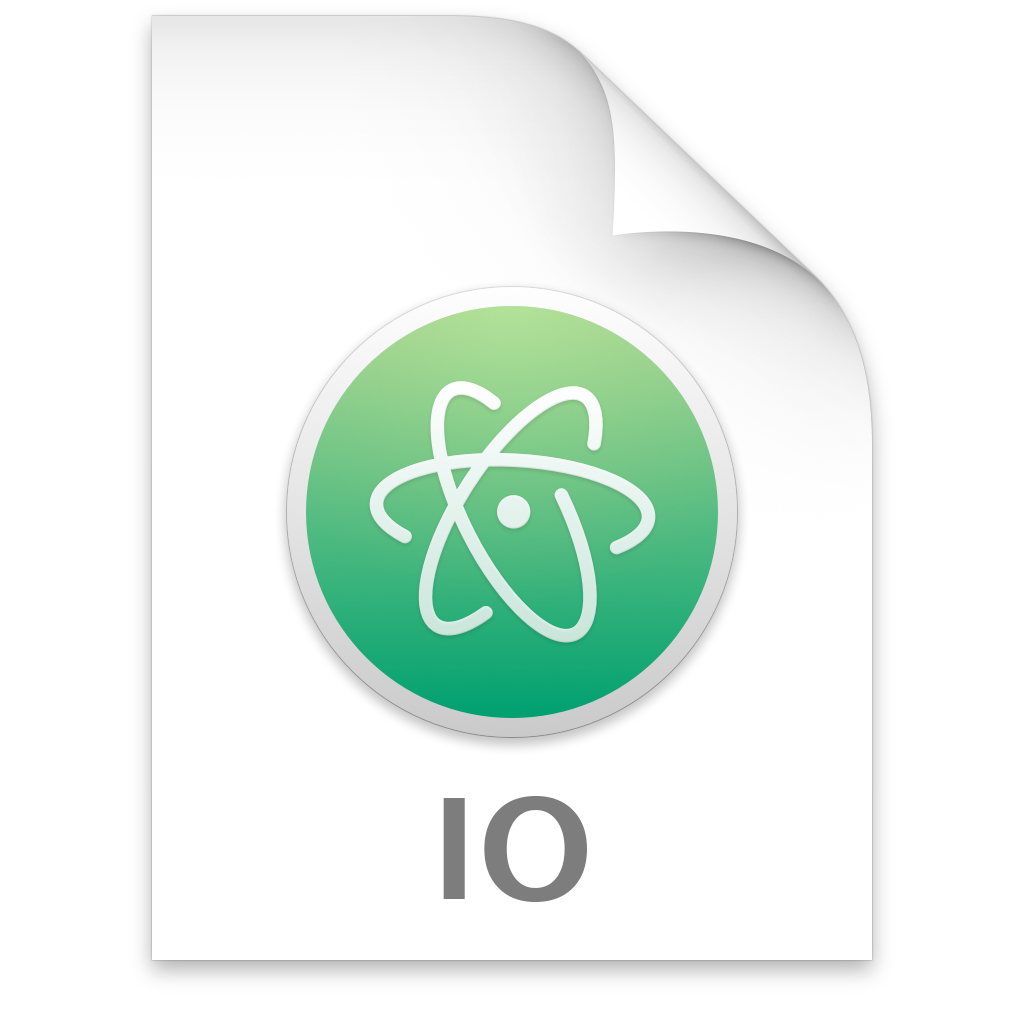
<style>
.page{position:relative;width:1024px;height:1024px;background:#ffffff}
.page>*{position:absolute;margin:0}
.t1{font:140px "LucidaGrande-Bold";color:#7d7d7d}
</style>
<div class="page">
<p class="t1" style="left:443px;top:796px;width:144px;height:106px">IO</p>
</div>
